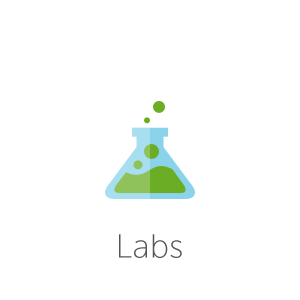
<style>
.page{position:relative;width:300px;height:300px;background:#ffffff}
.page>*{position:absolute;margin:0}
.t1{font:33.3px "MuseoSans-100";color:#555555}
</style>
<div class="page">
<p class="t1" style="left:119px;top:234px;width:63px;height:24px">Labs</p>
</div>
